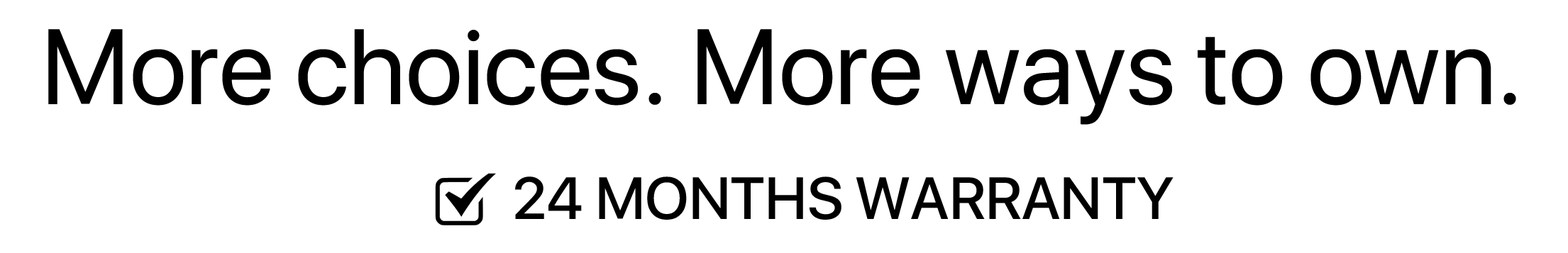
<style>
.page{position:relative;width:1568px;height:253px;background:#ffffff}
.page>*{position:absolute;margin:0}
.t1{font:106.4px "SFProDisplay-Regular";color:#000000}
.t2{font:59.1px "SFProDisplay-Medium";color:#000000}
</style>
<div class="page">
<p class="t1" style="left:48px;top:29px;width:1468px;height:96px">More choices. More ways to own.</p>
<p class="t2" style="left:515px;top:177px;width:659px;height:43px">24 MONTHS WARRANTY</p>
</div>
